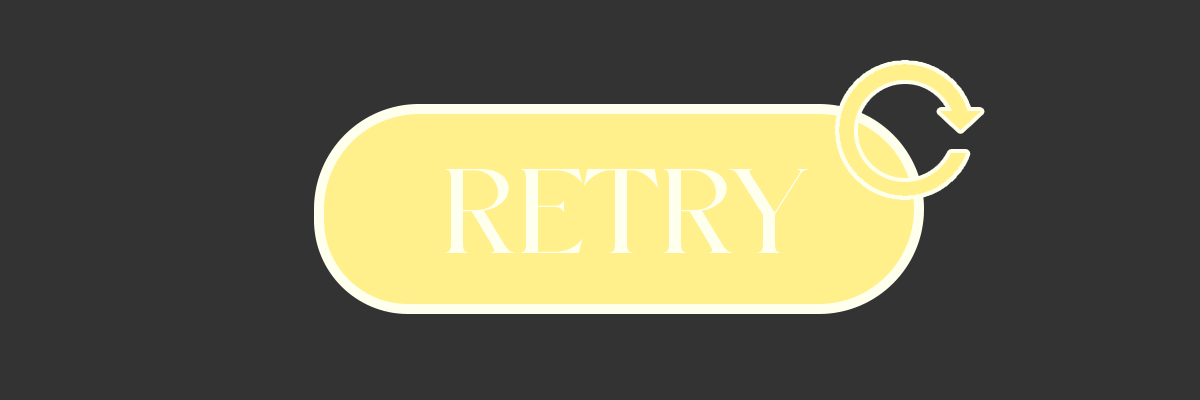
<style>
.page{position:relative;width:1200px;height:400px;background:#333333}
.page>*{position:absolute;margin:0}
.t1{font:120px "BelganAesthetic-Regular";color:#ffffed}
</style>
<div class="page">
<p class="t1" style="left:446px;top:168px;width:363px;height:85px">RETRY</p>
</div>
